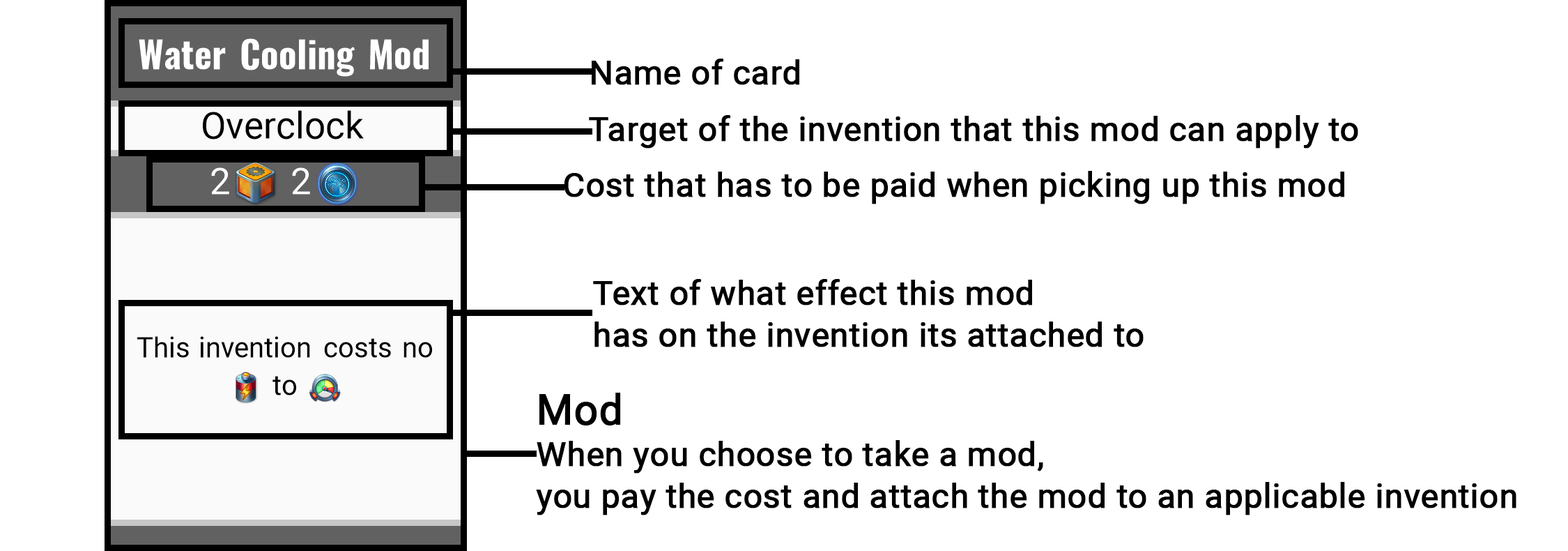
<style>
.page{position:relative;width:1568px;height:551px;background:#ffffff}
.page>*{position:absolute;margin:0}
.t1{font:33.5px "Roboto-Regular";color:#000000;font-weight:bold}
.t2{font:33.5px/41.8px "Roboto-Regular";color:#000000;font-weight:bold}
.t3{font:41.8px/41.8px "Roboto-Regular";color:#000000;font-weight:bold}
</style>
<div class="page">
<p class="t1" style="left:592px;top:59px;width:207px;height:26px">Name of card</p>
<p class="t1" style="left:589px;top:115px;width:769px;height:33px">Target of the invention that this mod can apply to</p>
<p class="t1" style="left:564px;top:171px;width:780px;height:33px">Cost that has to be paid when picking up this mod</p>
<p class="t2" style="left:593px;top:279px;width:551px;height:68px">Text of what effect this mod<br>has on the invention its attached to</p>
<p class="t2" style="left:536px;top:392px;width:980px;height:123px"><span class="t3">Mod<br></span>When you choose to take a mod, <br>you pay the cost and attach the mod to an applicable invention</p>
</div>
